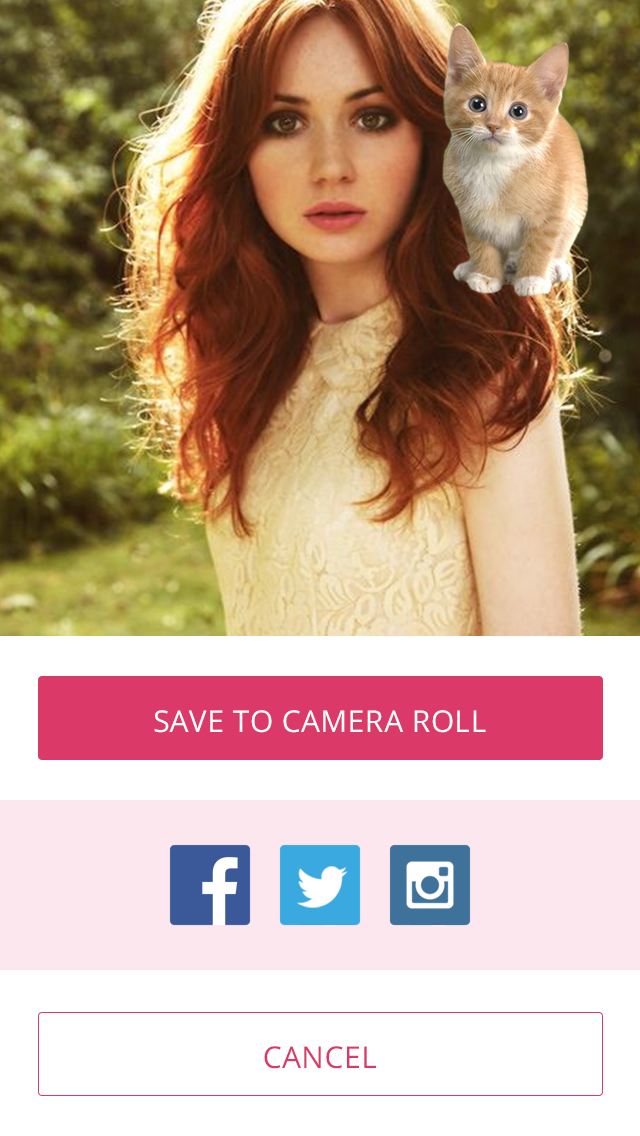
<style>
.page{position:relative;width:640px;height:1136px;background:#ffffff}
.page>*{position:absolute;margin:0}
.t1{font:30px "OpenSans";letter-spacing:0.01em;color:#ffffff;text-transform:uppercase}
.t2{font:30px "OpenSans";letter-spacing:0.01em;color:#db3967;text-transform:uppercase}
</style>
<div class="page">
<p class="t1" style="left:154px;top:710px;width:332px;height:23px">SAVE TO CAMERA ROLL</p>
<p class="t2" style="left:264px;top:1046px;width:112px;height:23px">CANCEL</p>
</div>
